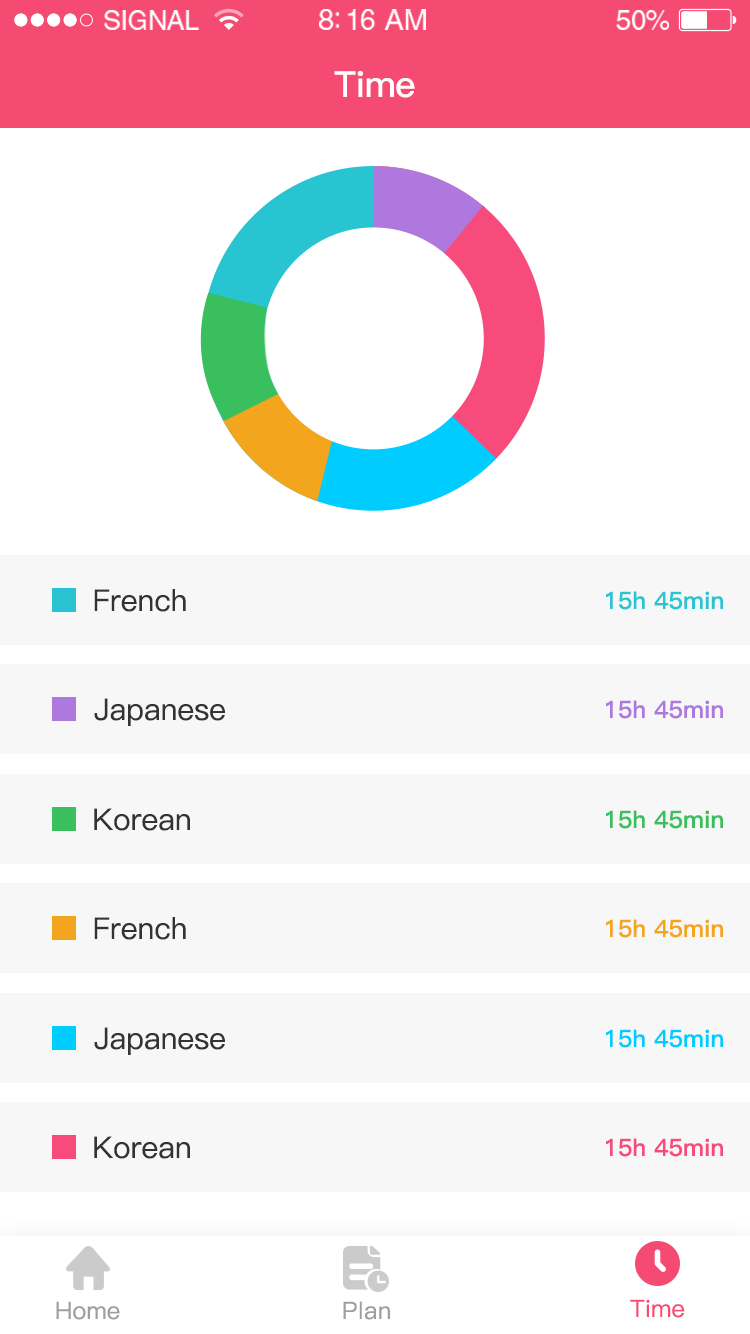
<style>
.page{position:relative;width:750px;height:1334px;background:#ffffff}
.page>*{position:absolute;margin:0}
.t1{font:26.9px "HelveticaLTStd-Roman";letter-spacing:-0.02em;color:#ffffff}
.t2{font:29.3px "HelveticaLTStd-Roman";letter-spacing:-0.02em;color:#ffffff}
.t3{font:28.1px "HelveticaLTStd-Roman";letter-spacing:-0.02em;color:#ffffff}
.t4{font:36px "PingFang-SC-Bold";letter-spacing:-0.02em;color:#ffffff}
.t5{font:30px "PingFang-SC-Medium";color:#333333}
.t6{font:24px "PingFang-SC-Bold";color:#28c4d2}
.t7{font:24px "PingFang-SC-Bold";color:#af78de}
.t8{font:24px "PingFang-SC-Bold";color:#3abf5f}
.t9{font:24px "PingFang-SC-Bold";color:#f3a51e}
.t10{font:24px "PingFang-SC-Bold";color:#00ccff}
.t11{font:24px "PingFang-SC-Bold";color:#f64b7b}
.t12{font:24px "PingFang-SC-Medium";color:#9e9e9e}
.t13{font:24px "PingFang-SC-Medium";letter-spacing:0.02em;color:#9e9e9e}
.t14{font:24px "PingFang-SC-Medium";color:#f54a72}
</style>
<div class="page">
<p class="t1" style="left:103px;top:10px;width:96px;height:20px">SIGNAL</p>
<p class="t2" style="left:319px;top:9px;width:107px;height:21px">8:16 AM</p>
<p class="t3" style="left:616px;top:10px;width:53px;height:20px">50%</p>
<p class="t4" style="left:334px;top:71px;width:81px;height:27px">Time</p>
<p class="t5" style="left:94px;top:589px;width:92px;height:23px">French</p>
<p class="t6" style="left:606px;top:591px;width:117px;height:19px">15h 45min</p>
<p class="t5" style="left:94px;top:698px;width:131px;height:28px">Japanese</p>
<p class="t7" style="left:606px;top:700px;width:117px;height:19px">15h 45min</p>
<p class="t5" style="left:94px;top:808px;width:96px;height:23px">Korean</p>
<p class="t8" style="left:606px;top:810px;width:117px;height:19px">15h 45min</p>
<p class="t5" style="left:94px;top:917px;width:92px;height:23px">French</p>
<p class="t9" style="left:606px;top:919px;width:117px;height:19px">15h 45min</p>
<p class="t5" style="left:94px;top:1027px;width:131px;height:28px">Japanese</p>
<p class="t10" style="left:606px;top:1029px;width:117px;height:19px">15h 45min</p>
<p class="t5" style="left:94px;top:1136px;width:96px;height:23px">Korean</p>
<p class="t11" style="left:606px;top:1138px;width:117px;height:19px">15h 45min</p>
<p class="t12" style="left:56px;top:1301px;width:64px;height:19px">Home</p>
<p class="t13" style="left:343px;top:1301px;width:47px;height:19px">Plan</p>
<p class="t14" style="left:630px;top:1299px;width:55px;height:19px">Time</p>
</div>
